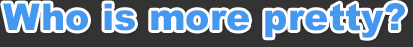
<style>
.page{position:relative;width:413px;height:47px;background:#333333}
.page>*{position:absolute;margin:0}
.t1{font:36.9px "Arial-Black";color:#4398ef}
</style>
<div class="page">
<p class="t1" style="left:3px;top:3px;width:402px;height:35px">Who is more pretty?</p>
</div>
